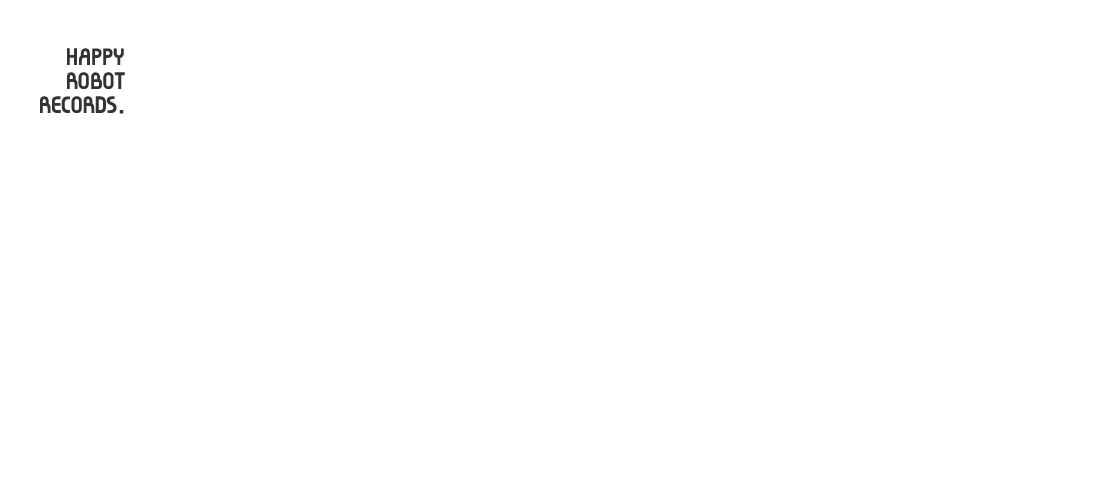
<style>
.page{position:relative;width:1100px;height:500px;background:#ffffff}
.page>*{position:absolute;margin:0}
.t1{font:30px/24px "ahn2006-B";letter-spacing:-0.02em;color:#333333}
</style>
<div class="page">
<p class="t1" style="left:40px;top:48px;width:85px;height:66px;text-align:right">HAPPY<br>ROBOT<br>RECORDS.</p>
</div>
